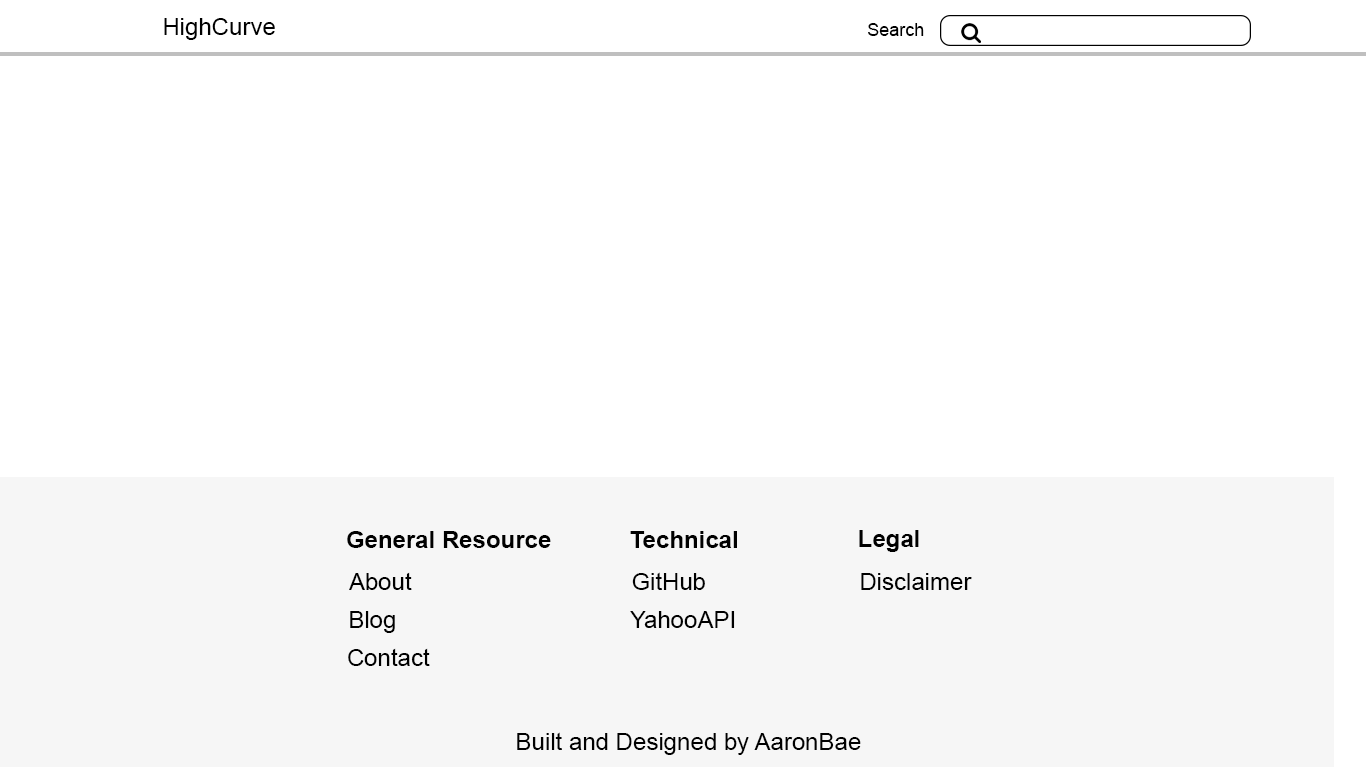
<style>
.page{position:relative;width:1366px;height:768px;background:#ffffff}
.page>*{position:absolute;margin:0}
.t1{font:24px "ArialMT";color:#000000}
.t2{font:18px "ArialMT";color:#000000}
.t3{font:24px "Arial-BoldMT";color:#000000}
</style>
<div class="page">
<p class="t1" style="left:164px;top:18px;width:111px;height:22px">HighCurve</p>
<p class="t2" style="left:868px;top:23px;width:56px;height:13px">Search</p>
<p class="t3" style="left:347px;top:531px;width:204px;height:17px">General Resource</p>
<p class="t3" style="left:630px;top:531px;width:107px;height:17px">Technical</p>
<p class="t3" style="left:859px;top:530px;width:60px;height:22px">Legal</p>
<p class="t1" style="left:349px;top:572px;width:63px;height:18px">About</p>
<p class="t1" style="left:632px;top:572px;width:73px;height:18px">GitHub</p>
<p class="t1" style="left:861px;top:573px;width:111px;height:17px">Disclaimer</p>
<p class="t1" style="left:350px;top:611px;width:45px;height:22px">Blog</p>
<p class="t1" style="left:630px;top:611px;width:105px;height:17px">YahooAPI</p>
<p class="t1" style="left:348px;top:648px;width:82px;height:18px">Contact</p>
<p class="t1" style="left:517px;top:732px;width:344px;height:23px">Built and Designed by AaronBae</p>
</div>
